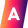
<style>
.page{position:relative;width:28px;height:28px;background:#ffffff}
.page>*{position:absolute;margin:0}
.t1{font:17.7px "Bahnschrift-Bold";color:#ffffff;scale:1.09 1}
</style>
<div class="page">
<p class="t1" style="left:7px;top:7px;width:13px;height:14px">A</p>
</div>
